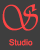
<style>
.page{position:relative;width:40px;height:50px;background:#3e3e3e}
.page>*{position:absolute;margin:0}
.t1{font:37.3px "Vivaldii";color:#fd4545;scale:0.86 1}
.t2{font:8.3px "ArialMT";color:#fd4545}
</style>
<div class="page">
<p class="t1" style="left:2px;top:4px;width:36px;height:27px">S</p>
<p class="t2" style="left:9px;top:39px;width:24px;height:7px">Studio</p>
</div>
